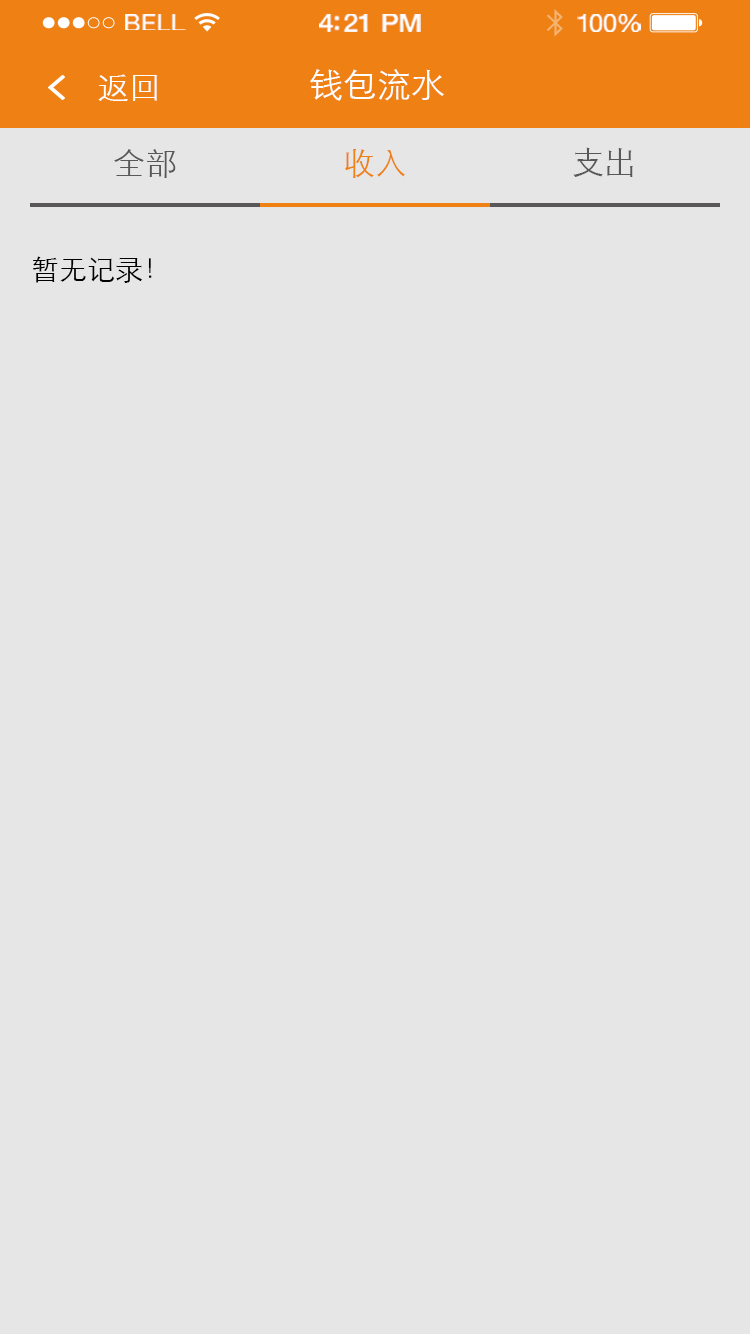
<style>
.page{position:relative;width:750px;height:1334px;background:#e6e6e6}
.page>*{position:absolute;margin:0}
.t1{font:23.3px "HelveticaNeue";letter-spacing:0.02em;color:#ffffff;scale:1.06 1}
.t2{font:25.3px "HelveticaNeue-Medium";letter-spacing:-0.02em;color:#ffffff;scale:1.06 1}
.t3{font:24.3px "HelveticaNeue";letter-spacing:-0.02em;color:#ffffff;scale:1.06 1}
.t4{font:32px "STXihei";color:#ffffff}
.t5{font:34px "STXihei";color:#ffffff}
.t6{font:32px "STXihei";color:#595757}
.t7{font:32px "STXihei";color:#ef8013}
.t8{font:28px "STXihei";color:#000000}
</style>
<div class="page">
<p class="t1" style="left:125px;top:14px;width:61px;height:16px">BELL</p>
<p class="t2" style="left:319px;top:14px;width:102px;height:18px">4:21 PM</p>
<p class="t3" style="left:577px;top:14px;width:64px;height:18px">100%</p>
<p class="t4" style="left:98px;top:74px;width:59px;height:27px">返回</p>
<p class="t5" style="left:310px;top:69px;width:134px;height:32px">钱包流水</p>
<p class="t6" style="left:114px;top:149px;width:62px;height:29px">全部</p>
<p class="t7" style="left:345px;top:149px;width:60px;height:29px">收入</p>
<p class="t6" style="left:573px;top:147px;width:60px;height:30px">支出</p>
<p class="t8" style="left:33px;top:256px;width:119px;height:27px">暂无记录！</p>
</div>
